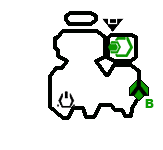
<style>
.page{position:relative;width:163px;height:150px;background:#ffffff}
.page>*{position:absolute;margin:0}
.t1{font:12px "Arial-Black";color:#0d9e01}
</style>
<div class="page">
<p class="t1" style="left:145px;top:99px;width:9px;height:9px">B</p>
</div>
